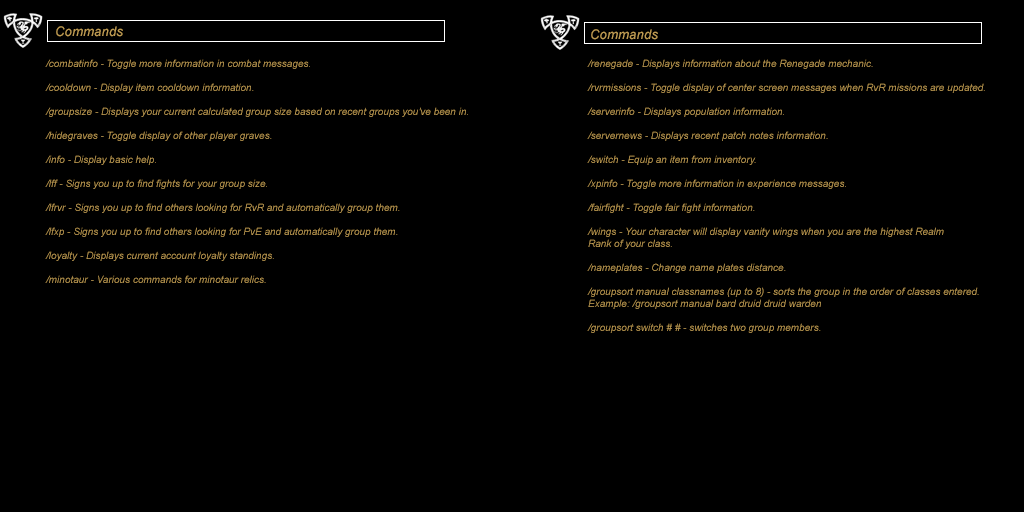
<style>
.page{position:relative;width:1024px;height:512px;background:#000000}
.page>*{position:absolute;margin:0}
.t1{font:13.3px "Arial-ItalicMT";color:#be9b53}
.t2{font:10px "Arial-ItalicMT";color:#be9b53}
</style>
<div class="page">
<p class="t1" style="left:56px;top:26px;width:67px;height:11px">Commands</p>
<p class="t1" style="left:591px;top:29px;width:67px;height:11px">Commands</p>
<p class="t2" style="left:45px;top:59px;width:423px;height:224px">/combatinfo - Toggle more information in combat messages.<br><br>/cooldown - Display item cooldown information.<br><br>/groupsize - Displays your current calculated group size based on recent groups you've been in.<br><br>/hidegraves - Toggle display of other player graves.<br><br>/info - Display basic help.<br><br>/lff - Signs you up to find fights for your group size.<br><br>/lfrvr - Signs you up to find others looking for RvR and automatically group them.<br><br>/lfxp - Signs you up to find others looking for PvE and automatically group them.<br><br>/loyalty - Displays current account loyalty standings.<br><br>/minotaur - Various commands for minotaur relics.</p>
<p class="t2" style="left:587px;top:59px;width:398px;height:274px">/renegade - Displays information about the Renegade mechanic.<br><br>/rvrmissions - Toggle display of center screen messages when RvR missions are updated.<br><br>/serverinfo - Displays population information.<br><br>/servernews - Displays recent patch notes information.<br><br>/switch - Equip an item from inventory.<br><br>/xpinfo - Toggle more information in experience messages.<br><br>/fairfight - Toggle fair fight information.<br><br>/wings - Your character will display vanity wings when you are the highest Realm <br>Rank of your class.<br><br>/nameplates - Change name plates distance.<br><br>/groupsort manual classnames (up to 8) - sorts the group in the order of classes entered. <br>Example: /groupsort manual bard druid druid warden<br><br>/groupsort switch # # - switches two group members.</p>
</div>
